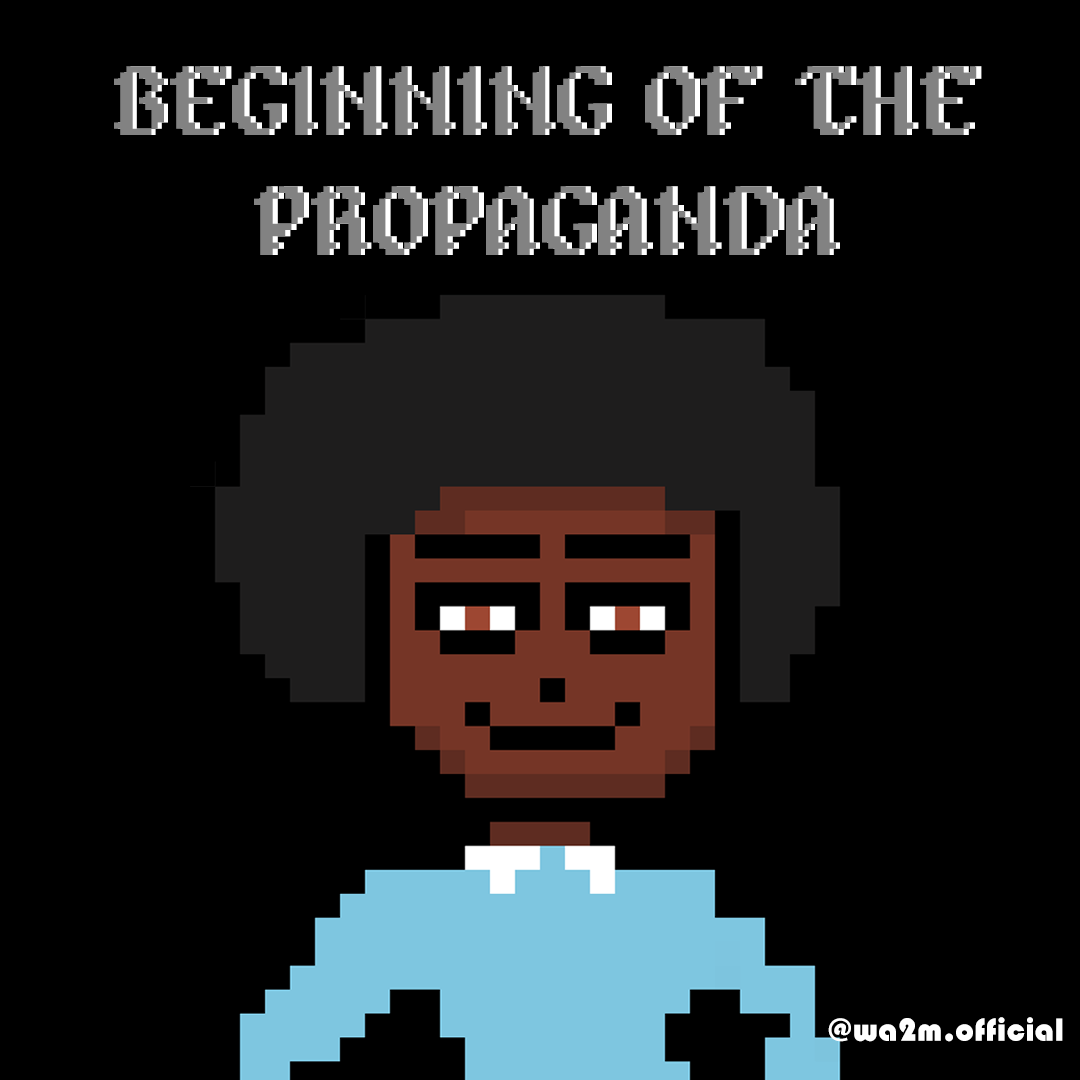
<style>
.page{position:relative;width:1080px;height:1080px;background:#000000}
.page>*{position:absolute;margin:0}
.t1{font:100px "Alagard";color:#828282}
.t2{font:100px "Alagard"}
.t3{font:33.3px "Bauhaus93";color:#ffffff}
</style>
<div class="page">
<p class="t1" style="left:114px;top:66px;width:863px;height:189px;text-align:center">BEGINNING OF THE <br>PROPAGANDA</p>
<p class="t2" style="left:118px;top:66px;width:864px;height:189px;text-align:center">BEGINNING OF THE <br>PROPAGANDA</p>
<p class="t3" style="left:828px;top:1017px;width:235px;height:25px">@wa2m.official</p>
</div>
